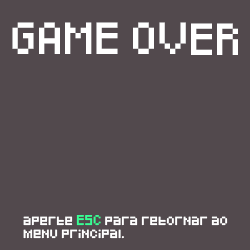
<style>
.page{position:relative;width:250px;height:250px;background:#52494d}
.page>*{position:absolute;margin:0}
.t1{font:26.2px "Pixeled";color:#ffffff}
.t2{font:8.3px/12.5px "Pixeled";color:#ffffff}
.t3{font:8.3px "Pixeled";color:#ffffff}
.t4{font:8.3px "Pixeled";color:#36ff94}
</style>
<div class="page">
<p class="t1" style="left:12px;top:22px;width:226px;height:33px">GAME OVER</p>
<p class="t2" style="left:23px;top:215px;width:205px;height:24px"><span class="t3">     aperte </span><span class="t4">ESC</span><span class="t3"> para </span>retornar ao<br>     menu principal.</p>
</div>
